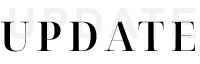
<style>
.page{position:relative;width:200px;height:64px;background:#ffffff}
.page>*{position:absolute;margin:0}
.t1{font:41px "NotoSerifDisplay-SemiBold";letter-spacing:0.15em;color:#000000}
</style>
<div class="page">
<p class="t1" style="left:0px;top:21px;width:195px;height:31px">UPDATE</p>
</div>
